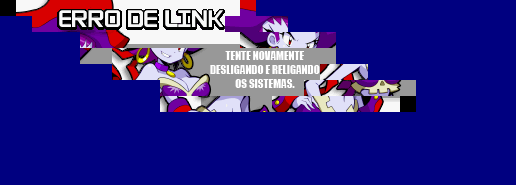
<style>
.page{position:relative;width:516px;height:185px;background:#000080}
.page>*{position:absolute;margin:0}
.t1{font:12px "Impact";color:#ffffff;scale:0.92 1}
</style>
<div class="page">
<p class="t1" style="left:210px;top:51px;width:110px;height:37px;text-align:center">TENTE NOVAMENTE<br>DESLIGANDO E RELIGANDO<br>OS SISTEMAS.</p>
</div>
